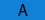
<style>
.page{position:relative;width:45px;height:20px;background:#1081d5}
.page>*{position:absolute;margin:0}
.t1{font:16.7px "MyriadPro-Regular";color:#000000}
</style>
<div class="page">
<p class="t1" style="left:18px;top:4px;width:10px;height:12px">A</p>
</div>
